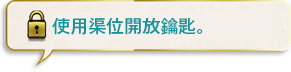
<style>
.page{position:relative;width:291px;height:72px;background:#f5f0ea}
.page>*{position:absolute;margin:0}
.t1{font:18px "GothicMB101Pr6N-Medium";color:#0e959e}
</style>
<div class="page">
<p class="t1" style="left:52px;top:17px;width:151px;height:18px">使用渠位開放鑰匙。</p>
</div>
